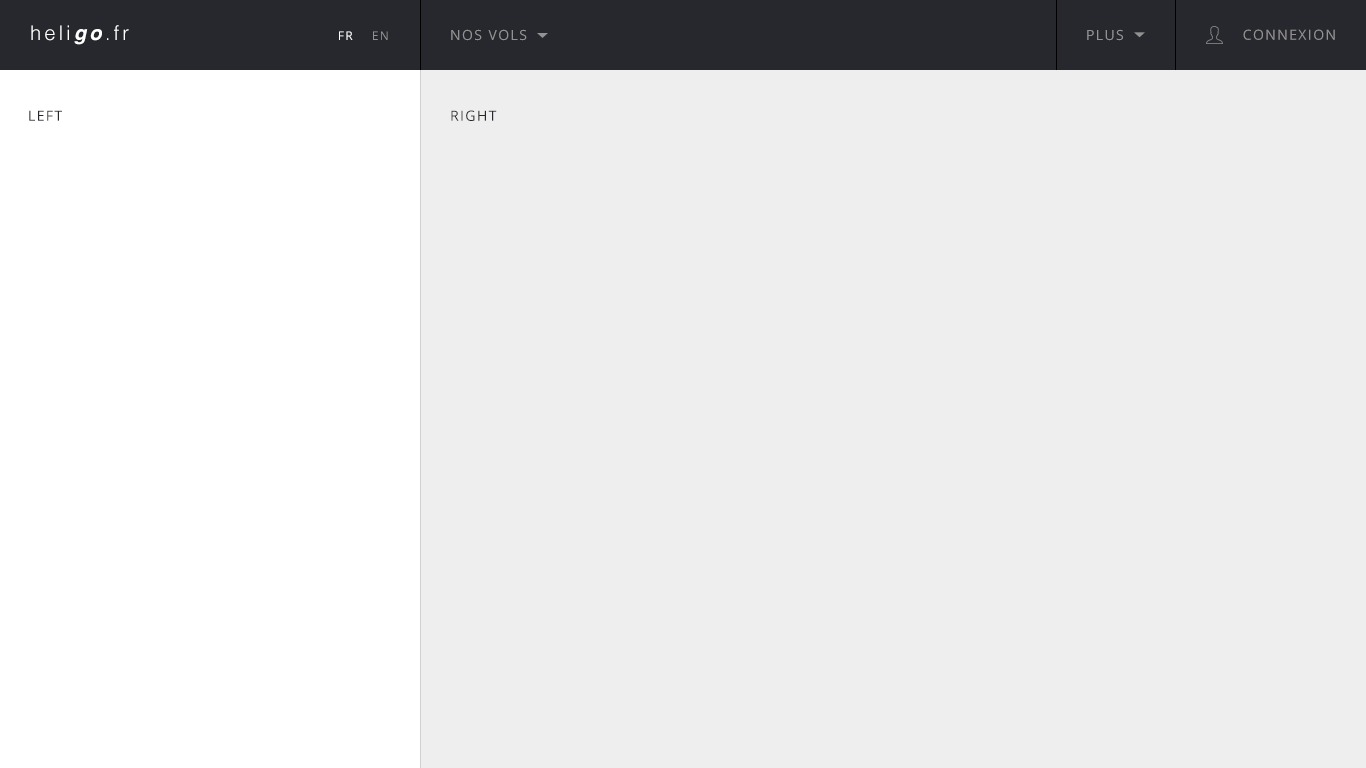
<style>
.page{position:relative;width:1366px;height:768px;background:#eeeeee}
.page>*{position:absolute;margin:0}
.t1{font:20px "Helvetica-Light";letter-spacing:0.16em;color:#ffffff}
.t2{font:20px "Helvetica-BoldOblique";letter-spacing:0.16em;color:#ffffff}
.t3{font:14px "OpenSans";letter-spacing:0.1em;color:#929292;text-transform:uppercase}
.t4{font:12px "OpenSans";letter-spacing:0.1em;color:#ffffff;text-transform:uppercase}
.t5{font:12px "OpenSans";letter-spacing:0.1em;color:#929292;text-transform:uppercase}
.t6{font:14px "OpenSans";letter-spacing:0.1em;color:#27282d;text-transform:uppercase}
</style>
<div class="page">
<p class="t1" style="left:31px;top:25px;width:98px;height:20px">heli<span class="t2">go</span>.fr</p>
<p class="t3" style="left:451px;top:29px;width:76px;height:12px">nos vols</p>
<p class="t3" style="left:1087px;top:29px;width:36px;height:12px">plus</p>
<p class="t3" style="left:1243px;top:29px;width:92px;height:11px">connexion</p>
<p class="t4" style="left:339px;top:31px;width:14px;height:9px">Fr</p>
<p class="t5" style="left:373px;top:31px;width:15px;height:9px">En</p>
<p class="t6" style="left:29px;top:110px;width:33px;height:11px">left</p>
<p class="t6" style="left:451px;top:110px;width:46px;height:11px">RIGHT</p>
</div>
